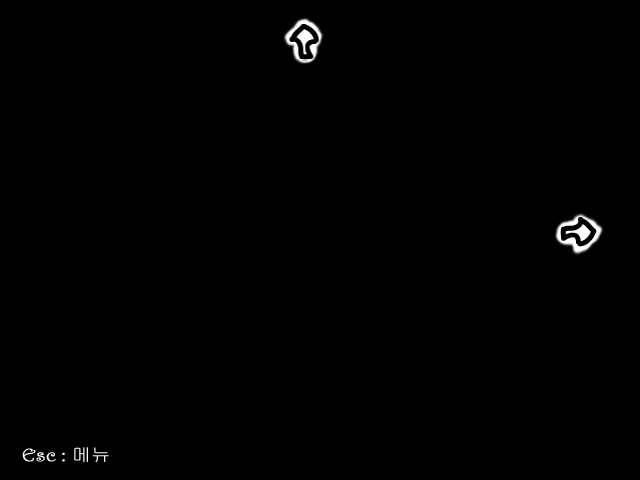
<style>
.page{position:relative;width:640px;height:480px;background:#000000}
.page>*{position:absolute;margin:0}
.t1{font:18px "Harrington";color:#ffffff;font-weight:bold;scale:1.08 1}
.t2{font:18px "Gulim";color:#ffffff;font-weight:bold;scale:1.08 1}
</style>
<div class="page">
<p class="t1" style="left:22px;top:447px;width:87px;height:15px">Esc : <span class="t2">메뉴</span></p>
</div>
